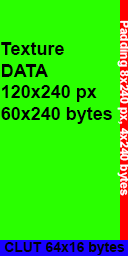
<style>
.page{position:relative;width:128px;height:256px;background:#2aff00}
.page>*{position:absolute;margin:0}
.t1{font:12px "Arial-BoldMT";color:#ffffff}
.t2{font:18px "Arial-BoldMT";color:#000000}
.t3{font:14px "Arial-BoldMT";color:#000000}
</style>
<div class="page">
<p class="t1" style="left:117px;top:20px;width:13px;height:176px;rotate:90deg">Padding 8x240 px, 4x240 bytes</p>
<p class="t2" style="left:1px;top:42px;width:111px;height:82px">Texture <br>DATA<br>120x240 px<br>60x240 bytes</p>
<p class="t3" style="left:4px;top:242px;width:121px;height:13px">CLUT 64x16 bytes</p>
</div>
